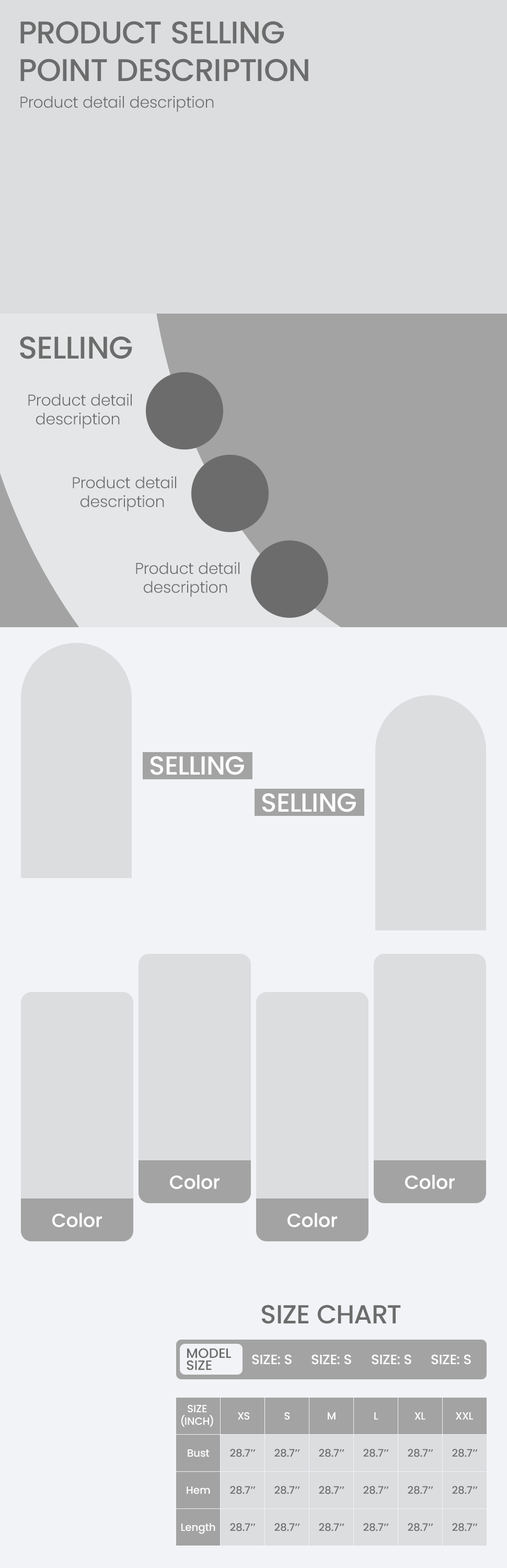
<style>
.page{position:relative;width:507px;height:1568px;background:#dcdddf}
.page>*{position:absolute;margin:0}
.t1{font:31.4px "Poppins-Medium";color:#6c6c6c;text-transform:uppercase}
.t2{font:15.7px "Poppins-Light";color:#6c6c6c}
.t3{font:26.1px "Poppins-Medium";color:#ffffff;text-transform:uppercase}
.t4{font:18.8px "Poppins-Medium";color:#ffffff}
.t5{font:26.1px "Poppins-Medium";color:#6c6c6c;text-transform:uppercase}
.t6{font:13.6px "Poppins-Medium";color:#6c6c6c;text-transform:uppercase}
.t7{font:13.6px "Poppins-Medium";color:#ffffff;text-transform:uppercase}
.t8{font:10.5px "Poppins-Medium";color:#ffffff;text-transform:uppercase}
.t9{font:10.5px "Poppins-Medium";color:#ffffff}
.t10{font:10.5px "Poppins-Medium";color:#6c6c6c;text-transform:uppercase}
</style>
<div class="page">
<p class="t1" style="left:20px;top:21px;width:288px;height:61px">Product selling<br>point description</p>
<p class="t2" style="left:20px;top:96px;width:194px;height:16px">Product detail description</p>
<p class="t1" style="left:20px;top:336px;width:112px;height:23px">selling</p>
<p class="t2" style="left:28px;top:394px;width:104px;height:35px;text-align:center">Product detail<br>description</p>
<p class="t2" style="left:73px;top:476px;width:103px;height:35px;text-align:center">Product detail<br>description</p>
<p class="t2" style="left:136px;top:562px;width:103px;height:35px;text-align:center">Product detail<br>description</p>
<p class="t3" style="left:151px;top:756px;width:93px;height:19px">selling</p>
<p class="t3" style="left:262px;top:793px;width:94px;height:19px">selling</p>
<p class="t4" style="left:170px;top:1174px;width:50px;height:15px">Color</p>
<p class="t4" style="left:405px;top:1174px;width:50px;height:15px">Color</p>
<p class="t4" style="left:52px;top:1213px;width:50px;height:14px">Color</p>
<p class="t4" style="left:287px;top:1213px;width:50px;height:14px">Color</p>
<p class="t5" style="left:262px;top:1305px;width:139px;height:19px">SIZE CHART</p>
<p class="t6" style="left:187px;top:1348px;width:44px;height:22px">MODEL<br>SIZE</p>
<p class="t7" style="left:252px;top:1354px;width:40px;height:11px">size: s</p>
<p class="t7" style="left:312px;top:1354px;width:39px;height:11px">size: s</p>
<p class="t7" style="left:372px;top:1354px;width:39px;height:11px">size: s</p>
<p class="t7" style="left:431px;top:1354px;width:40px;height:11px">size: s</p>
<p class="t8" style="left:181px;top:1405px;width:32px;height:22px;text-align:center">size<br>(INCH)</p>
<p class="t8" style="left:238px;top:1412px;width:12px;height:8px">XS</p>
<p class="t8" style="left:284px;top:1412px;width:6px;height:8px">S</p>
<p class="t8" style="left:328px;top:1412px;width:8px;height:8px">M</p>
<p class="t8" style="left:374px;top:1412px;width:4px;height:8px">L</p>
<p class="t8" style="left:414px;top:1412px;width:11px;height:8px">XL</p>
<p class="t8" style="left:456px;top:1412px;width:17px;height:8px">XXL</p>
<p class="t9" style="left:188px;top:1449px;width:21px;height:8px">Bust</p>
<p class="t10" style="left:230px;top:1449px;width:26px;height:8px">28.7’’</p>
<p class="t10" style="left:274px;top:1449px;width:26px;height:8px">28.7’’</p>
<p class="t10" style="left:319px;top:1449px;width:25px;height:8px">28.7’’</p>
<p class="t10" style="left:363px;top:1449px;width:26px;height:8px">28.7’’</p>
<p class="t10" style="left:408px;top:1449px;width:25px;height:8px">28.7’’</p>
<p class="t10" style="left:452px;top:1449px;width:26px;height:8px">28.7’’</p>
<p class="t9" style="left:187px;top:1486px;width:23px;height:8px">Hem</p>
<p class="t10" style="left:230px;top:1486px;width:26px;height:8px">28.7’’</p>
<p class="t10" style="left:274px;top:1486px;width:26px;height:8px">28.7’’</p>
<p class="t10" style="left:319px;top:1486px;width:25px;height:8px">28.7’’</p>
<p class="t10" style="left:363px;top:1486px;width:26px;height:8px">28.7’’</p>
<p class="t10" style="left:408px;top:1486px;width:25px;height:8px">28.7’’</p>
<p class="t10" style="left:452px;top:1486px;width:26px;height:8px">28.7’’</p>
<p class="t9" style="left:181px;top:1523px;width:34px;height:11px">Length</p>
<p class="t10" style="left:230px;top:1523px;width:26px;height:8px">28.7’’</p>
<p class="t10" style="left:274px;top:1523px;width:26px;height:8px">28.7’’</p>
<p class="t10" style="left:319px;top:1523px;width:25px;height:8px">28.7’’</p>
<p class="t10" style="left:363px;top:1523px;width:26px;height:8px">28.7’’</p>
<p class="t10" style="left:408px;top:1523px;width:25px;height:8px">28.7’’</p>
<p class="t10" style="left:452px;top:1523px;width:26px;height:8px">28.7’’</p>
</div>
